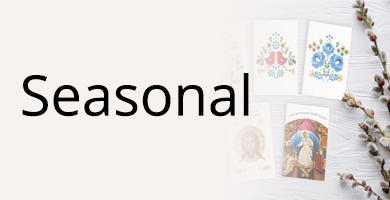
<style>
.page{position:relative;width:390px;height:200px;background:#f5f2f0}
.page>*{position:absolute;margin:0}
.t1{font:56px "OpenSans-Regular";color:#000000}
</style>
<div class="page">
<p class="t1" style="left:22px;top:73px;width:227px;height:44px">Seasonal</p>
</div>
